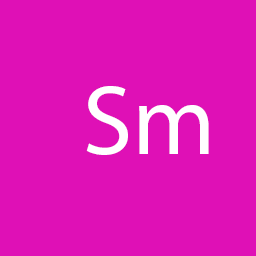
<style>
.page{position:relative;width:256px;height:256px;background:#df10b6}
.page>*{position:absolute;margin:0}
.t1{font:100px "MyriadPro-Regular";color:#ffffff}
</style>
<div class="page">
<p class="t1" style="left:86px;top:86px;width:123px;height:69px">Sm</p>
</div>
